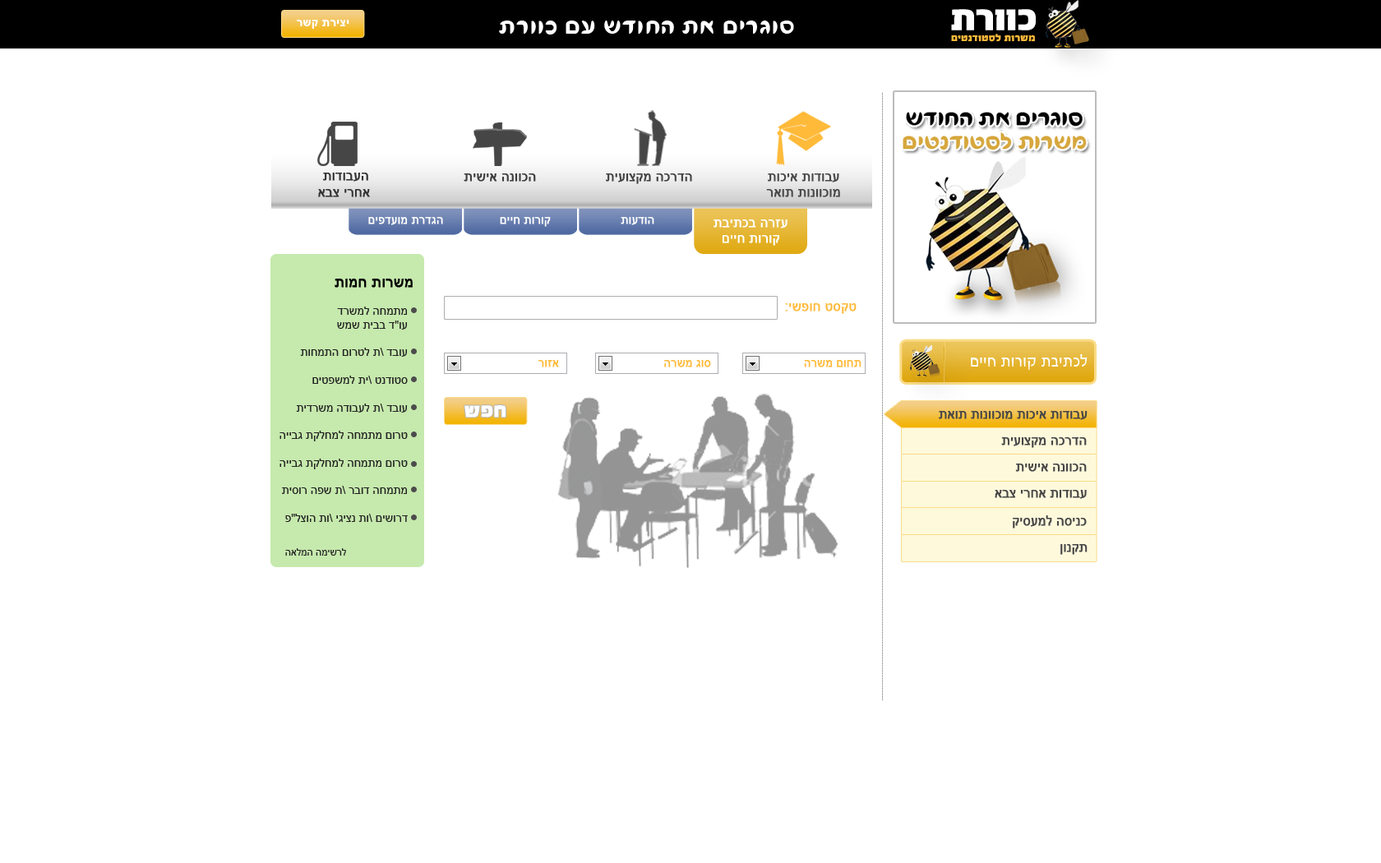
<style>
.page{position:relative;width:1381px;height:863px;background:#ffffff}
.page>*{position:absolute;margin:0}
.t1{font:11.5px "Arial-BoldMT";letter-spacing:0.03em;color:#ffffff}
.t2{font:28.8px "FbFlamingo-Regular";letter-spacing:0.03em;color:#ffffff}
.t3{font:9.9px "FbAdrenalin-Black";letter-spacing:0.03em;color:#ffba3a}
.t4{font:13.2px "ArialMT";color:#333333;font-weight:bold}
.t5{font:13.2px "ArialMT";color:#3c3c3c;font-weight:bold}
.t6{font:13.2px "ArialMT";color:#414141;font-weight:bold}
.t7{font:13.2px "ArialMT";color:#484848;font-weight:bold}
.t8{font:11.5px "ArialMT";color:#ffffff;font-weight:bold}
.t9{font:13.2px "ArialMT";color:#ffffff;font-weight:bold}
.t10{font:14.8px "ArialMT";color:#000000;font-weight:bold}
.t11{font:13.2px "ArialMT";color:#ffba3a;font-weight:bold}
.t12{font:11.5px "ArialMT";color:#212121}
.t13{font:11.5px "ArialMT";color:#ffba3a;font-weight:bold}
.t14{font:16.4px "FbConcept-Regular";letter-spacing:0.03em;color:#ffffff}
.t15{font:19.7px "FbAdrenalin-Black";color:#ffffff;font-weight:bold}
.t16{font:12.9px "ArialMT";color:#464646;font-weight:bold}
.t17{font:9.9px "ArialMT";color:#212121}
</style>
<div class="page">
<p class="t1" style="left:297px;top:20px;width:52px;height:9px">רשק תריצי</p>
<p class="t2" style="left:499px;top:21px;width:295px;height:14px">תרווכ םע שדוחה תא םירגוס</p>
<p class="t3" style="left:951px;top:34px;width:84px;height:8px">םיטנדוטסל תורשמ</p>
<p class="t4" style="left:318px;top:173px;width:52px;height:24px;text-align:center">תודובעה<br>אבצ ירחא</p>
<p class="t5" style="left:464px;top:173px;width:72px;height:9px">תישיא הנווכה</p>
<p class="t6" style="left:606px;top:173px;width:86px;height:11px">תיעוצקמ הכרדה</p>
<p class="t7" style="left:766px;top:173px;width:74px;height:24px;text-align:center">תוכיא תודובע<br>ראות תונווכומ</p>
<p class="t8" style="left:368px;top:217px;width:286px;height:10px">םיפדעומ תרדגה                םייח תורוק                    תועדוה</p>
<p class="t9" style="left:714px;top:220px;width:74px;height:26px;text-align:center">תביתכב הרזע<br>םייח תורוק</p>
<p class="t10" style="left:335px;top:279px;width:78px;height:9px">תומח תורשמ</p>
<p class="t11" style="left:785px;top:303px;width:72px;height:11px">:ישפוח טסקט</p>
<p class="t12" style="left:280px;top:307px;width:128px;height:215px;text-align:right">דרשמל החמתמ<br>שמש תיבב ד"וע<br><br>תוחמתה םורטל ת\ דבוע<br><br>םיטפשמל תי\ טנדוטס<br><br>תידרשמ הדובעל ת\ דבוע<br><br>הייבג תקלחמל החמתמ םורט<br><br>הייבג תקלחמל החמתמ םורט<br><br>תיסור הפש ת\ רבוד החמתמ <br><br>פ"לצוה תו\ יגיצנ תו\ םישורד</p>
<p class="t13" style="left:538px;top:360px;width:21px;height:8px">רוזא</p>
<p class="t13" style="left:664px;top:360px;width:47px;height:8px">הרשמ גוס</p>
<p class="t13" style="left:804px;top:360px;width:58px;height:8px">הרשמ םוחת</p>
<p class="t14" style="left:971px;top:354px;width:117px;height:16px">םייח תורוק תביתכל</p>
<p class="t15" style="left:465px;top:405px;width:41px;height:13px">שפח</p>
<p class="t16" style="left:939px;top:411px;width:149px;height:9px">תאות תונווכומ תוכיא תודובע</p>
<p class="t16" style="left:1001px;top:437px;width:86px;height:11px">תיעוצקמ הכרדה</p>
<p class="t16" style="left:1015px;top:464px;width:72px;height:8px">תישיא הנווכה</p>
<p class="t16" style="left:995px;top:490px;width:92px;height:9px">אבצ ירחא תודובע</p>
<p class="t16" style="left:1013px;top:516px;width:74px;height:13px">קיסעמל הסינכ</p>
<p class="t16" style="left:1061px;top:544px;width:27px;height:11px">ןונקת</p>
<p class="t17" style="left:285px;top:548px;width:61px;height:8px">האלמה המישרל</p>
</div>
